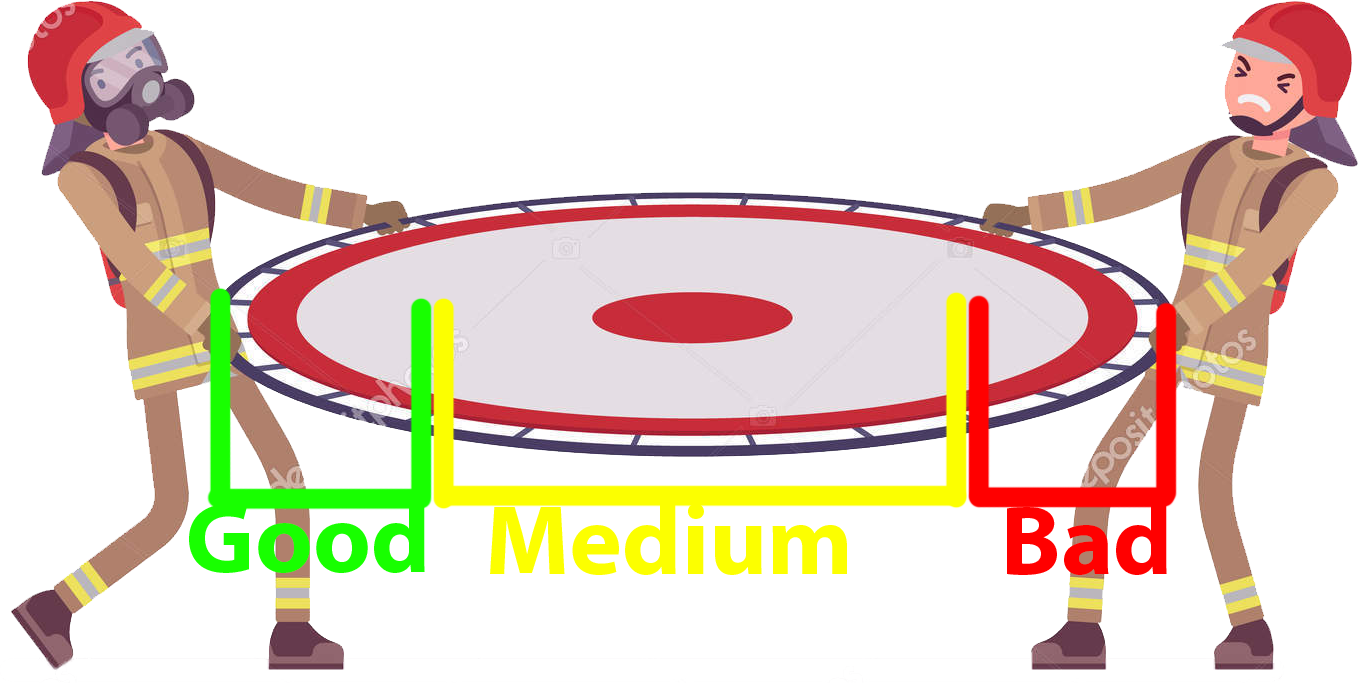
<style>
.page{position:relative;width:1358px;height:683px;background:#ffffff}
.page>*{position:absolute;margin:0}
.t1{font:100px "MyriadHebrew-Bold";color:#18ff00}
.t2{font:100px "MyriadHebrew-Bold";color:#fcff00}
.t3{font:100px "MyriadHebrew-Bold";color:#ff0000}
</style>
<div class="page">
<p class="t1" style="left:189px;top:501px;width:236px;height:72px">Good</p>
<p class="t2" style="left:490px;top:503px;width:357px;height:72px">Medium</p>
<p class="t3" style="left:1007px;top:503px;width:160px;height:72px">Bad</p>
</div>
